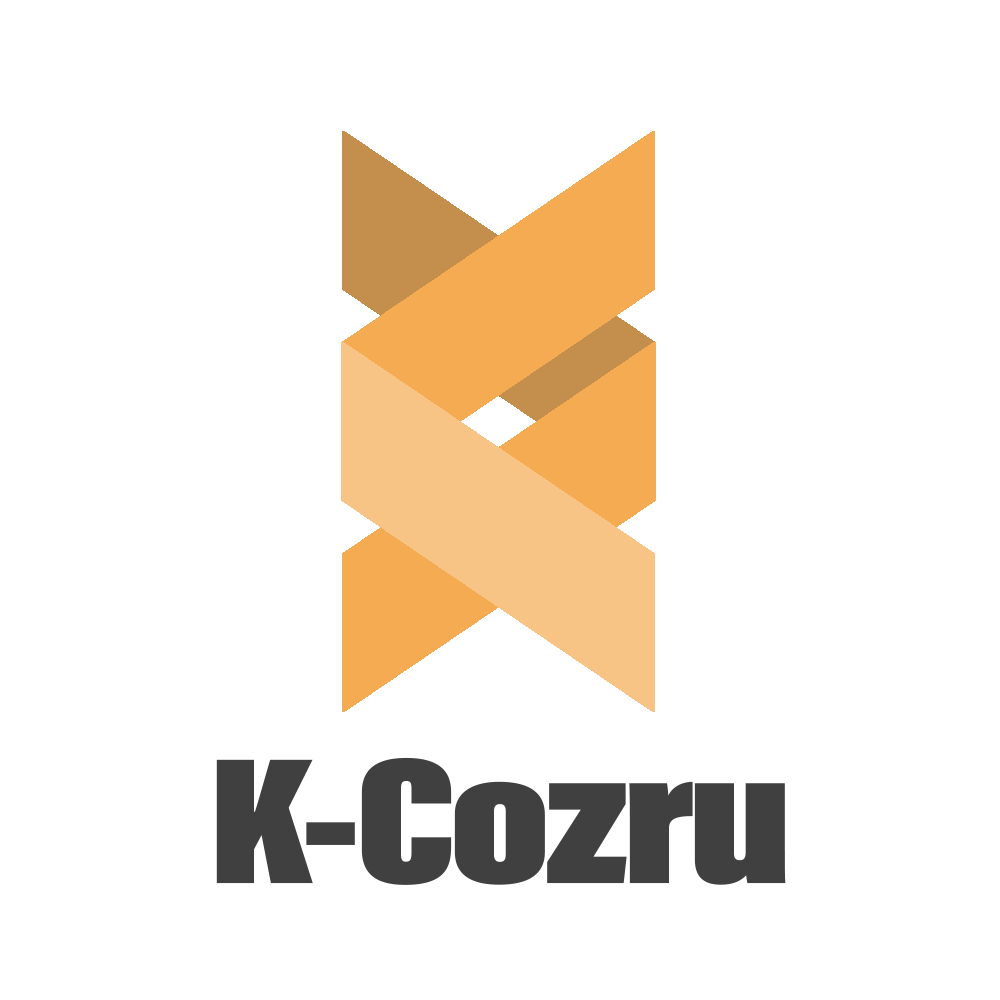
<style>
.page{position:relative;width:1000px;height:1000px;background:#ffffff}
.page>*{position:absolute;margin:0}
.t1{font:184.9px "AcuminConcept-ExtraCondensedUltraBlack";letter-spacing:-0.03em;color:#404040;scale:1.33 1}
</style>
<div class="page">
<p class="t1" style="left:216px;top:757px;width:570px;height:128px">K-Cozru</p>
</div>
